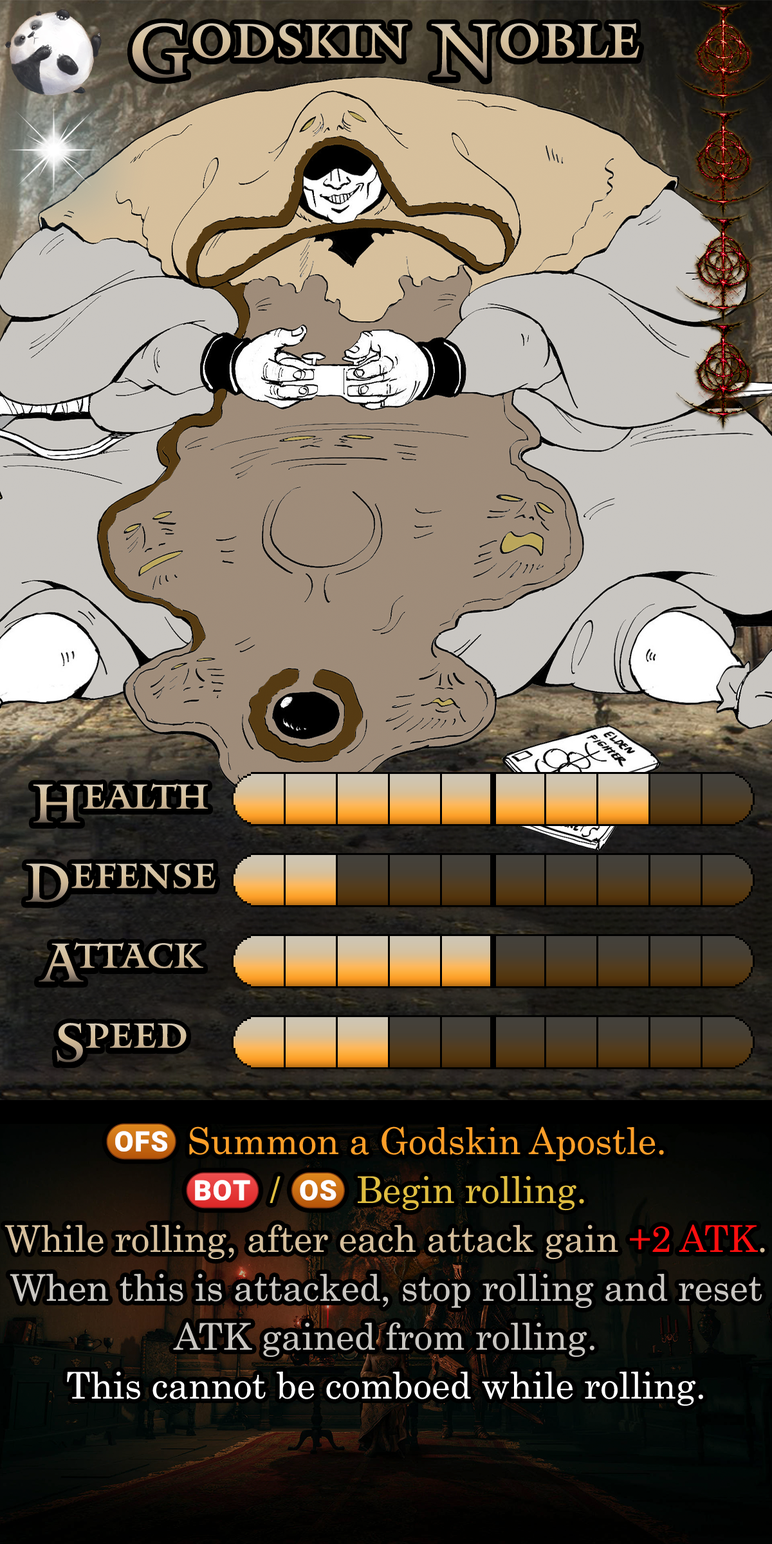
<style>
.page{position:relative;width:772px;height:1544px}
.page>*{position:absolute;margin:0}
.t1{font:128.7px "Mantinia";color:#d2bf9b}
.t2{font:92.7px "Mantinia"}
.t3{font:92.7px "Mantinia";color:#d2c09c}
.t4{font:63.1px/48.9px "Century";color:#c9c6c1}
.t5{font:63.1px/48.9px "stoogedings-Regular";color:#fd9e28}
.t6{font:63.1px/48.9px "Century";color:#fd9e28}
.t7{font:63.1px/48.9px "stoogedings-Regular";letter-spacing:0.278em;color:#dfbd40}
.t8{font:63.1px/48.9px "Century";letter-spacing:0.278em;color:#dfbd40}
.t9{font:63.1px/48.9px "stoogedings-Regular";color:#dfbd40}
.t10{font:63.1px/48.9px "Century";color:#dfbd40}
.t11{font:63.1px/48.9px "Century";color:#d6bf9c}
.t12{font:63.1px/48.9px "Century";color:#ff0e0e}
.t13{font:63.1px/48.9px "Century";color:#ffffff}
</style>
<div class="page">
<p class="t1" style="left:132px;top:23px;width:508px;height:56px">Godskin Noble</p>
<p class="t2" style="left:33px;top:783px;width:175px;height:40px">Health</p>
<p class="t2" style="left:26px;top:863px;width:190px;height:40px">Defense</p>
<p class="t2" style="left:39px;top:943px;width:164px;height:39px">Attack</p>
<p class="t3" style="left:57px;top:1023px;width:130px;height:39px">Speed</p>
<p class="t4" style="left:5px;top:1123px;width:760px;height:284px;text-align:center"><span class="t5">(OFS)</span><span class="t6"> Summon a Godskin Apostle.<br></span><span class="t7">(BOT)</span><span class="t8">/</span><span class="t9">(OS)</span><span class="t10"> Begin rolling.<br></span><span class="t11">While rolling, after each attack gain </span><span class="t12">+2 ATK</span><span class="t11">.<br></span>When this is attacked, stop rolling and reset ATK gained from rolling.<br><span class="t13">This cannot be comboed while rolling.</span></p>
</div>
